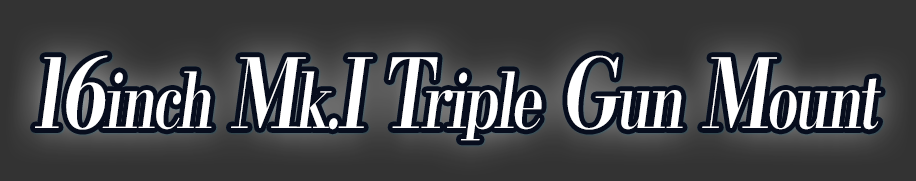
<style>
.page{position:relative;width:916px;height:181px;background:#333333}
.page>*{position:absolute;margin:0}
.t1{font:76.8px "KochoStd-Heavy";letter-spacing:-0.05em;color:#ffffff;font-style:italic;scale:0.75 1}
.t2{font:96px "KochoStd-Heavy";letter-spacing:-0.05em;color:#ffffff;font-style:italic;scale:0.75 1}
</style>
<div class="page">
<p class="t1" style="left:35px;top:55px;width:846px;height:86px"><span class="t2">16</span>inch<span class="t2"> M</span>k.<span class="t2">I T</span>riple<span class="t2"> G</span>un<span class="t2"> M</span>ount</p>
</div>
